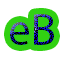
<style>
.page{position:relative;width:64px;height:64px;background:#ffffff}
.page>*{position:absolute;margin:0}
.t1{font:45.6px "MyriadPro-Regular"}
</style>
<div class="page">
<p class="t1" style="left:10px;top:14px;width:44px;height:31px">eB</p>
</div>
